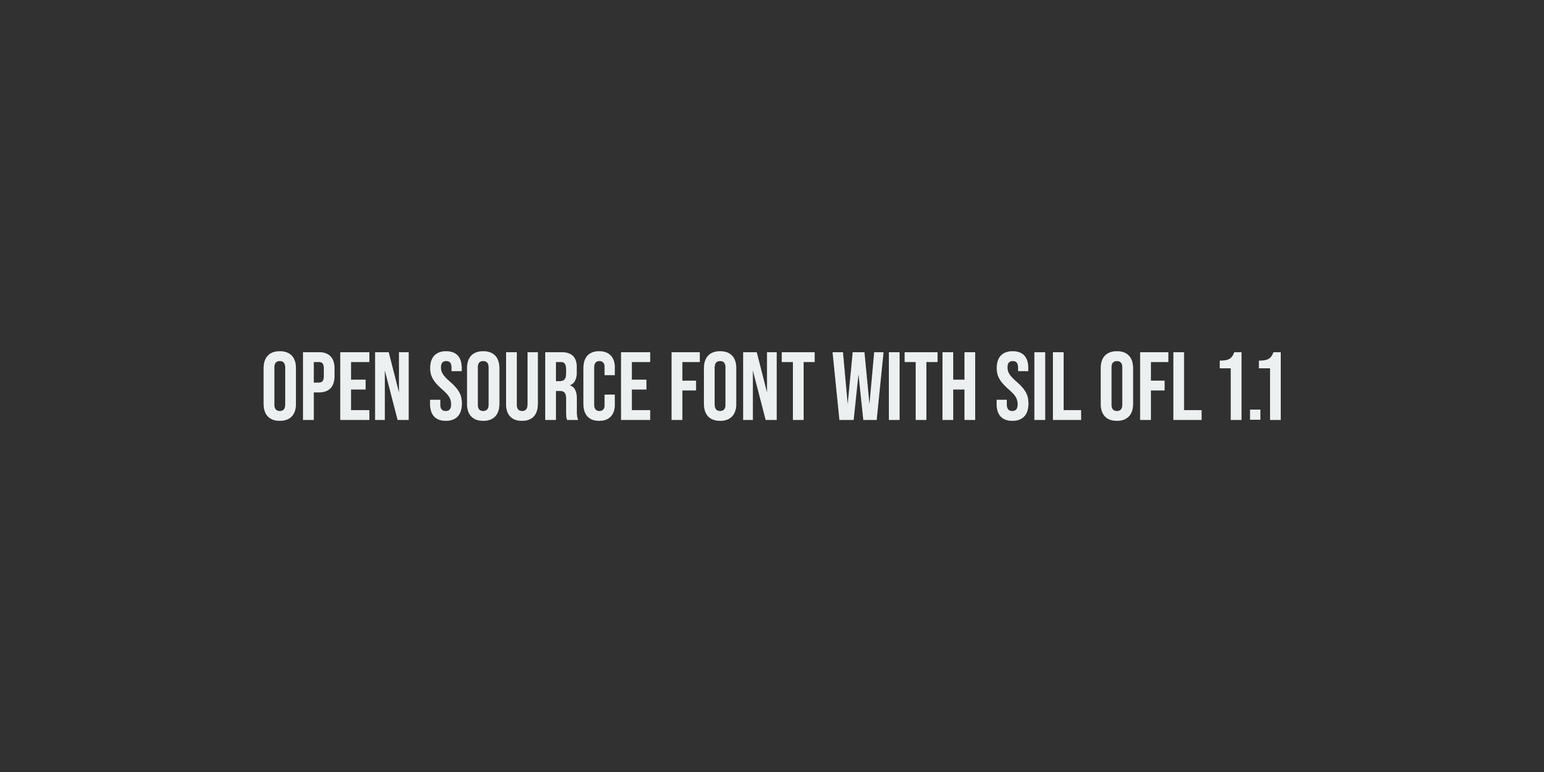
<style>
.page{position:relative;width:1544px;height:772px;background:#313131}
.page>*{position:absolute;margin:0}
.t1{font:96.5px "BebasNeue-Regular";color:#ecf0f1}
</style>
<div class="page">
<p class="t1" style="left:263px;top:351px;width:1018px;height:70px">open source font with sil OFL 1.1</p>
</div>
